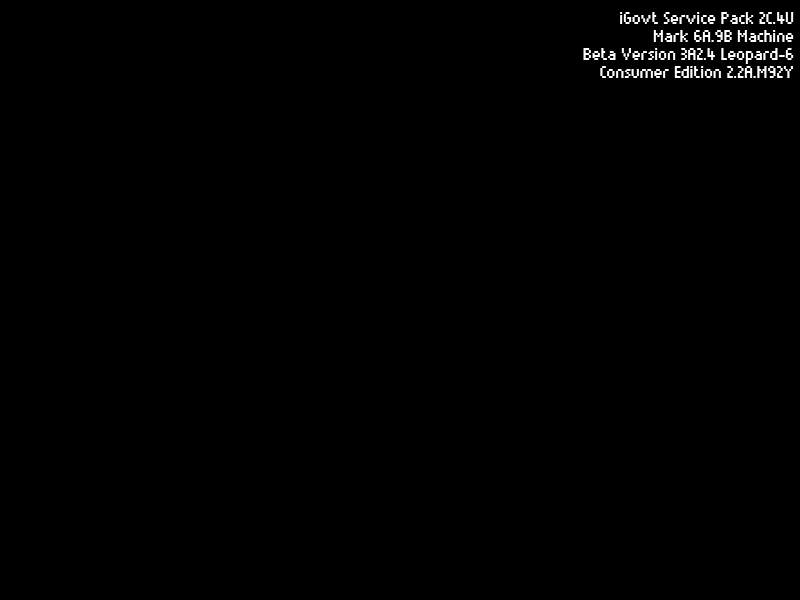
<style>
.page{position:relative;width:800px;height:600px;background:#000000}
.page>*{position:absolute;margin:0}
.t1{font:18px/18px "Munro";letter-spacing:-0.01em;color:#ffffff}
</style>
<div class="page">
<p class="t1" style="left:583px;top:12px;width:211px;height:66px;text-align:right">iGovt Service Pack 2C.4U<br>Mark 6A.9B Machine<br> Beta Version 3A2.4 Leopard-6<br>Consumer Edition 2.2A.M92Y</p>
</div>
